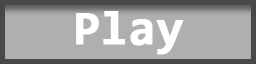
<style>
.page{position:relative;width:256px;height:64px;background:#afafaf}
.page>*{position:absolute;margin:0}
.t1{font:48px "Consolas-Bold";color:#ffffff;font-weight:bold}
</style>
<div class="page">
<p class="t1" style="left:76px;top:11px;width:108px;height:44px">Play</p>
</div>
